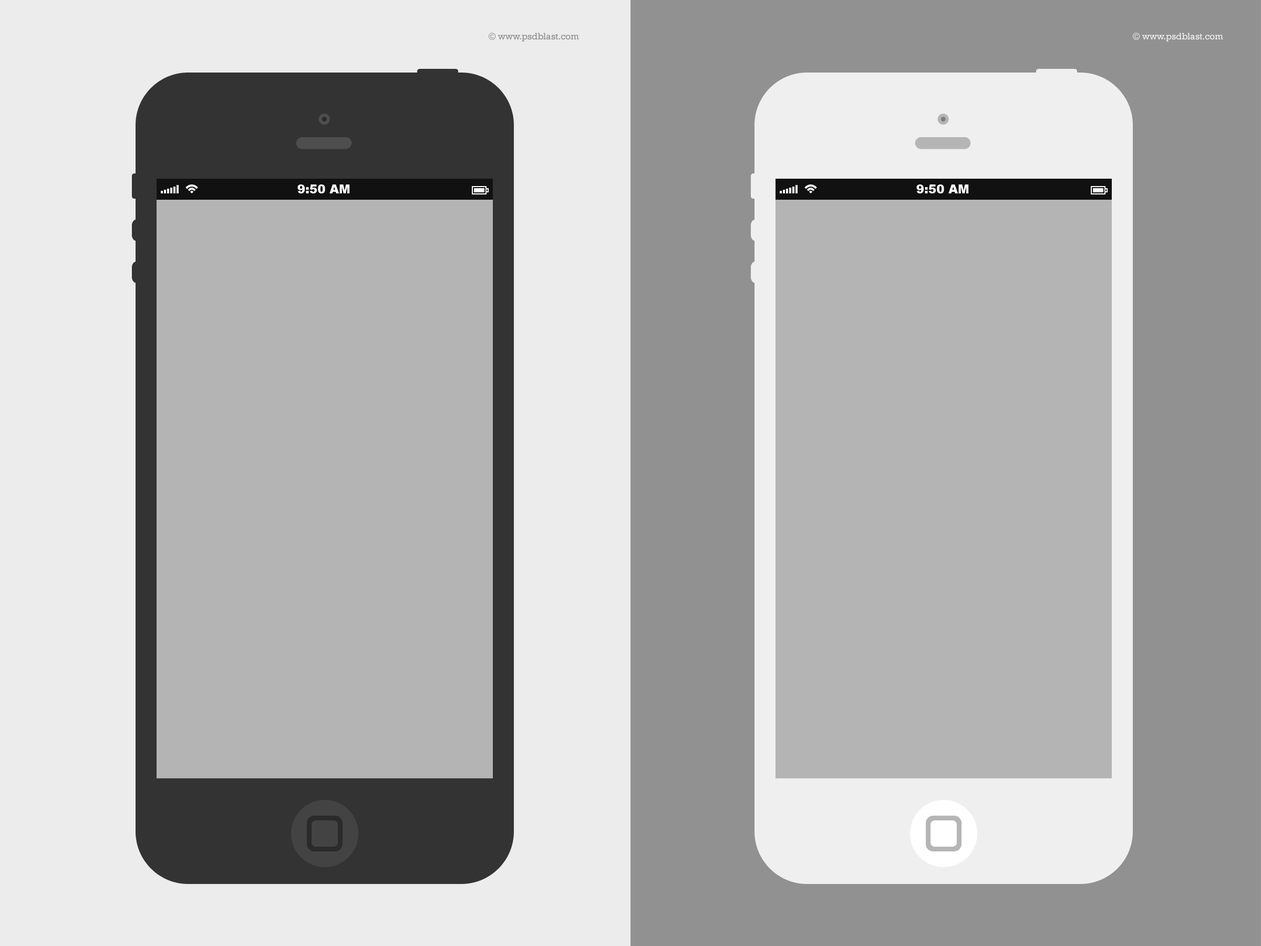
<style>
.page{position:relative;width:1261px;height:946px;background:#b4b4b4}
.page>*{position:absolute;margin:0}
.t1{font:12.1px "Arial-Black";color:#ffffff;text-transform:uppercase}
</style>
<div class="page">
<p class="t1" style="left:297px;top:184px;width:53px;height:9px">9:50 AM</p>
<p class="t1" style="left:916px;top:184px;width:53px;height:9px">9:50 AM</p>
</div>
